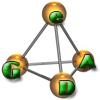
<style>
.page{position:relative;width:100px;height:100px;background:#ffffff}
.page>*{position:absolute;margin:0}
.t1{font:20px "JazzLetPlain";font-weight:bold}
.t2{font:24px "JazzLetPlain";letter-spacing:0.01em;font-weight:bold}
.t3{font:16px "Arial-Black";letter-spacing:0.01em;font-weight:bold;scale:1.2 1}
.t4{font:20px "JazzLetPlain";letter-spacing:0.01em;font-weight:bold}
</style>
<div class="page">
<p class="t1" style="left:50px;top:12px;width:13px;height:11px">e</p>
<p class="t2" style="left:2px;top:62px;width:18px;height:17px">G</p>
<p class="t3" style="left:79px;top:55px;width:17px;height:13px">A</p>
<p class="t4" style="left:59px;top:81px;width:16px;height:14px">D</p>
</div>
